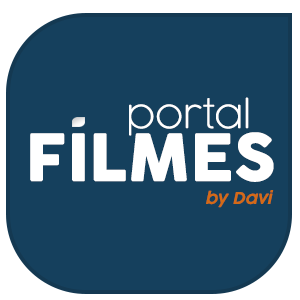
<style>
.page{position:relative;width:300px;height:300px;background:#15405d}
.page>*{position:absolute;margin:0}
.t1{font:36.9px "COCOGOOSE-UltraLight";color:#ffffff}
.t2{font:64.4px "Cocogoose";color:#ffffff}
.t3{font:16px "CocogoosePro-SemiLightItalic";color:#d46a17}
</style>
<div class="page">
<p class="t1" style="left:129px;top:97px;width:120px;height:39px">portal</p>
<p class="t2" style="left:30px;top:132px;width:244px;height:50px">FILMES</p>
<p class="t3" style="left:206px;top:190px;width:68px;height:18px">by Davi</p>
</div>
